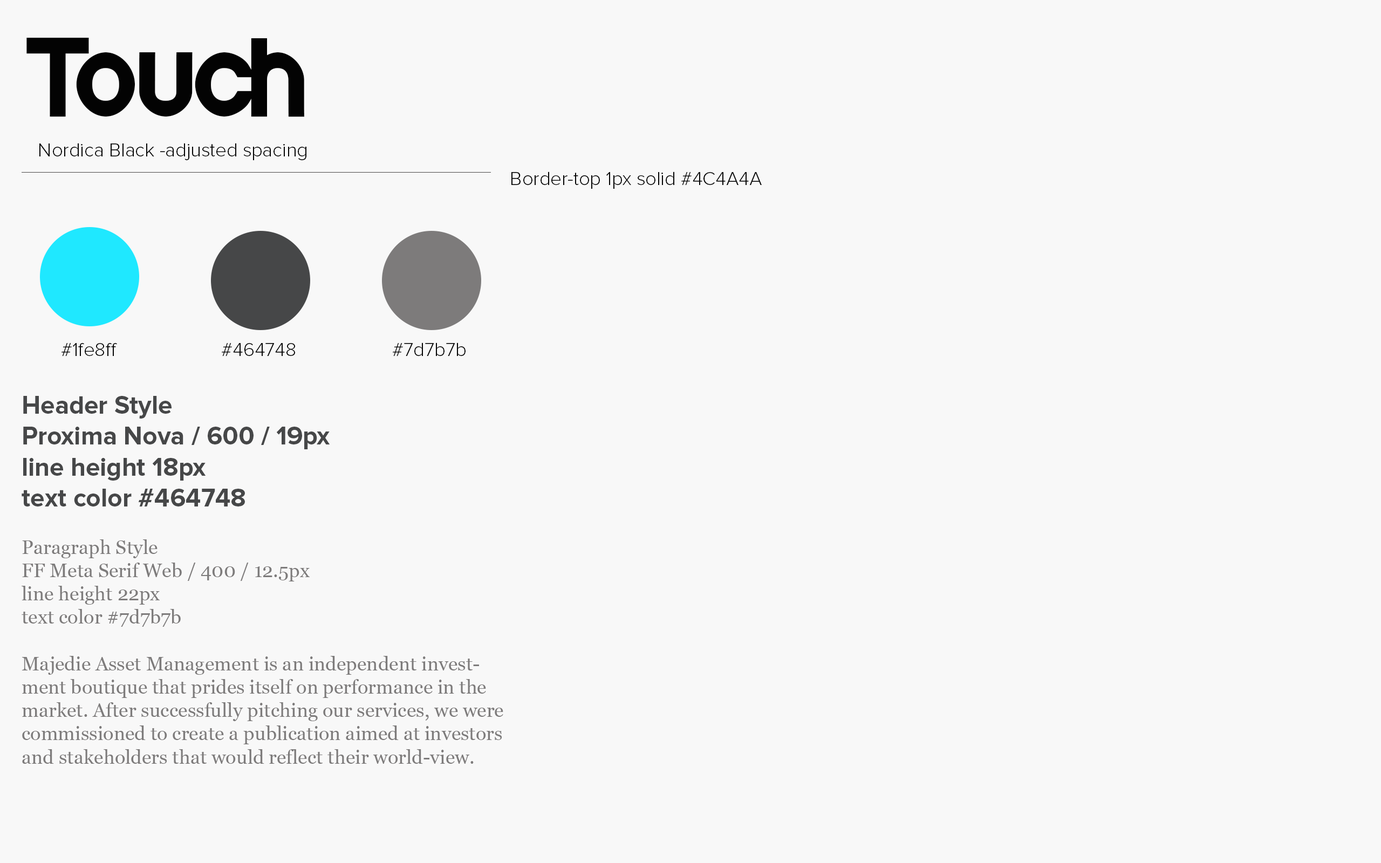
<style>
.page{position:relative;width:1381px;height:863px;background:#f8f8f8}
.page>*{position:absolute;margin:0}
.t1{font:92.8px "NordicaBlack";color:#030303}
.t2{font:19.4px "ProximaNova-Light";color:#030303}
.t3{font:25.9px "ProximaNova-Bold";color:#464748}
.t4{font:19.4px "Georgia";color:#7d7b7b}
</style>
<div class="page">
<p class="t1" style="left:26px;top:37px;width:278px;height:80px">Touch</p>
<p class="t2" style="left:39px;top:143px;width:267px;height:17px">Nordica Black -adjusted spacing</p>
<p class="t2" style="left:511px;top:172px;width:251px;height:17px">Border-top 1px solid #4C4A4A</p>
<p class="t2" style="left:61px;top:343px;width:56px;height:13px">#1fe8ff</p>
<p class="t2" style="left:221px;top:343px;width:74px;height:13px">#464748</p>
<p class="t2" style="left:392px;top:343px;width:74px;height:13px">#7d7b7b</p>
<p class="t3" style="left:22px;top:396px;width:308px;height:111px">Header Style<br>Proxima Nova / 600 / 19px<br>line height 18px <br>text color #464748</p>
<p class="t4" style="left:22px;top:540px;width:481px;height:224px">Paragraph Style<br>FF Meta Serif Web / 400 / 12.5px<br>line height 22px<br>text color #7d7b7b<br><br>Majedie Asset Management is an independent investment boutique that prides itself on performance in the market. After successfully pitching our services, we were commissioned to create a publication aimed at investors and stakeholders that would reflect their world-view.</p>
</div>
